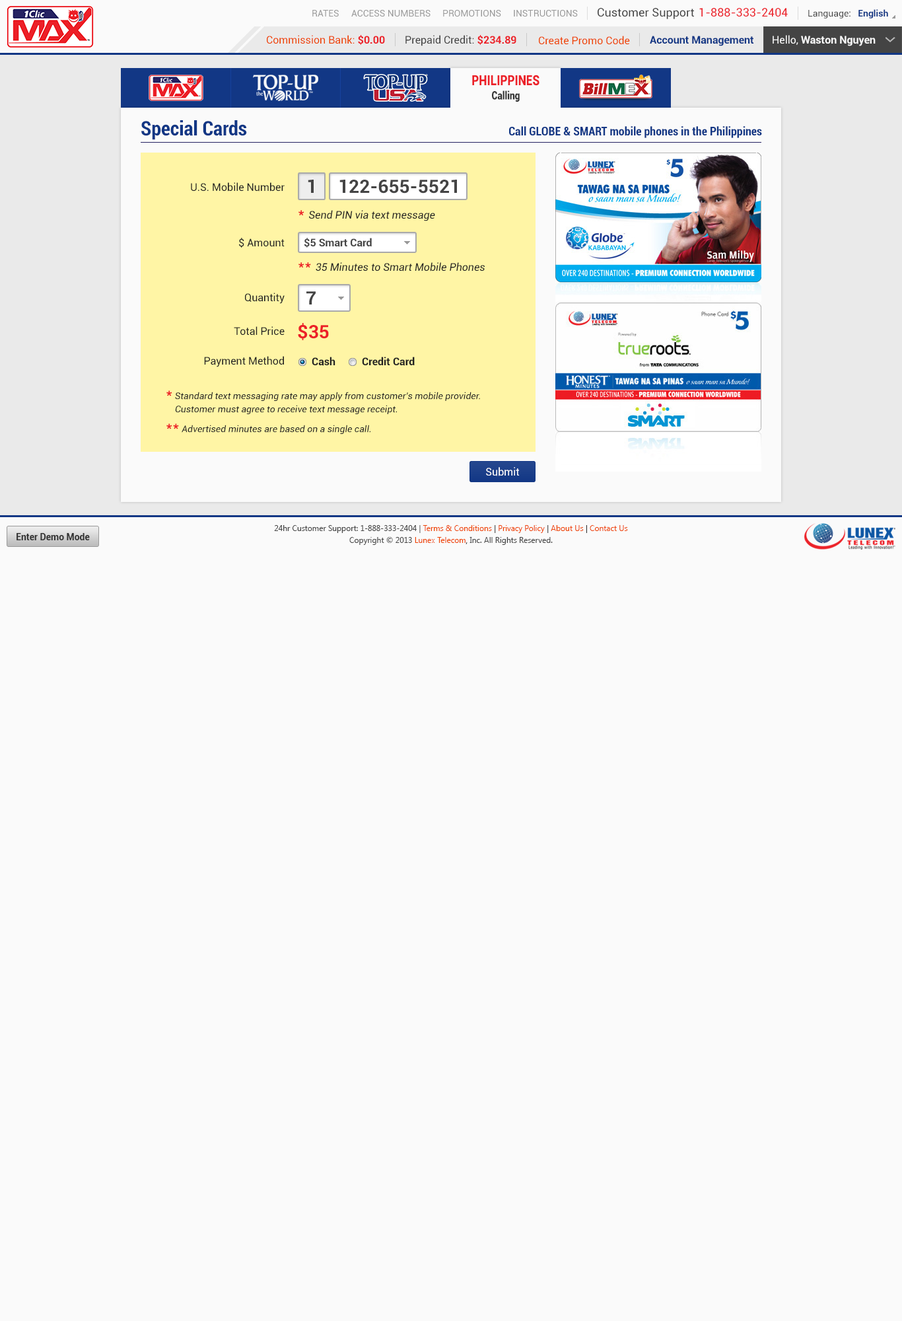
<style>
.page{position:relative;width:902px;height:1321px;background:#fafafa}
.page>*{position:absolute;margin:0}
.t1{font:9.2px "Roboto-Regular";color:#999999}
.t2{font:11.6px "Roboto-Regular";color:#444444}
.t3{font:11.6px "Roboto-Regular";color:#ec2029}
.t4{font:9.2px "Roboto-Regular";color:#444444}
.t5{font:9.2px "Roboto-Bold";color:#123785}
.t6{font:10.6px "Roboto-Regular";color:#ee4400}
.t7{font:10.6px "Roboto-Bold";color:#ec2028}
.t8{font:10.6px "Roboto-Regular";color:#444444}
.t9{font:10.6px "Roboto-Bold";color:#123785}
.t10{font:10.6px "Roboto-Bold";color:#fafafa}
.t11{font:10.6px "Roboto-Regular";color:#fafafa}
.t12{font:14.1px "Roboto-Black";color:#ec2028;scale:0.81 1}
.t13{font:11.3px "Roboto-Black";color:#333333;scale:0.81 1}
.t14{font:19.8px "Roboto-BoldCondensed";color:#123785}
.t15{font:11.9px "Roboto-BoldCondensed";color:#123785}
.t16{font:10.6px "Roboto-Regular";color:#222222}
.t17{font:18.5px "Roboto-Bold";color:#444444}
.t18{font:10.6px "Roboto-Italic";color:#222222}
.t19{font:15.9px "Roboto-Regular";color:#ec1e26}
.t20{font:10.6px "Roboto-Bold";color:#444444}
.t21{font:18.5px "Roboto-Bold";color:#ec2028}
.t22{font:10.6px "Roboto-Bold";color:#222222}
.t23{font:9.2px/13.2px "Roboto-Italic";color:#222222}
.t24{font:15.9px/11.9px "Roboto-Regular";color:#ec1e26}
.t25{font:9.2px "Roboto-Italic";color:#222222}
.t26{font:10.6px "Roboto-Regular";color:#ffffff}
.t27{font:9.2px "Roboto-Bold";color:#333333}
.t28{font:7.9px/11.9px "SegoeUI";color:#444444}
.t29{font:7.9px/11.9px "SegoeUI";color:#ee4400}
.t30{font:7.9px/11.9px "SegoeUI";color:#333333}
</style>
<div class="page">
<p class="t1" style="left:312px;top:10px;width:27px;height:7px">RATES</p>
<p class="t1" style="left:351px;top:10px;width:80px;height:7px">ACCESS NUMBERS</p>
<p class="t1" style="left:443px;top:10px;width:58px;height:7px">PROMOTIONS</p>
<p class="t1" style="left:514px;top:10px;width:64px;height:7px">INSTRUCTIONS</p>
<p class="t2" style="left:598px;top:8px;width:96px;height:11px">Customer Support</p>
<p class="t3" style="left:700px;top:8px;width:88px;height:9px">1-888-333-2404</p>
<p class="t4" style="left:809px;top:9px;width:80px;height:9px">Language:   <span class="t5">English</span></p>
<p class="t6" style="left:267px;top:35px;width:118px;height:10px">Commission Bank: <span class="t7">$0.00</span></p>
<p class="t8" style="left:406px;top:35px;width:111px;height:11px">Prepaid Credit: <span class="t7">$234.89</span></p>
<p class="t6" style="left:539px;top:36px;width:91px;height:9px">Create Promo Code</p>
<p class="t9" style="left:650px;top:36px;width:104px;height:10px">Account Management</p>
<p class="t10" style="left:773px;top:35px;width:103px;height:11px"><span class="t11">Hello, </span>Waston Nguyen</p>
<p class="t12" style="left:472px;top:75px;width:68px;height:11px">PHILIPPINES</p>
<p class="t13" style="left:492px;top:91px;width:28px;height:11px">Calling</p>
<p class="t14" style="left:141px;top:120px;width:106px;height:20px">Special Cards</p>
<p class="t15" style="left:509px;top:126px;width:253px;height:12px">Call GLOBE &amp; SMART mobile phones in the Philippines</p>
<p class="t16" style="left:191px;top:182px;width:94px;height:10px">U.S. Mobile Number</p>
<p class="t17" style="left:308px;top:180px;width:6px;height:13px">1</p>
<p class="t17" style="left:340px;top:180px;width:117px;height:14px">122-655-5521</p>
<p class="t18" style="left:299px;top:210px;width:136px;height:11px"><span class="t19">* </span>Send PIN via text message</p>
<p class="t16" style="left:239px;top:238px;width:46px;height:10px">$ Amount</p>
<p class="t20" style="left:304px;top:238px;width:68px;height:10px">$5 Smart Card</p>
<p class="t18" style="left:299px;top:262px;width:186px;height:10px"><span class="t19">** </span>35 Minutes to Smart Mobile Phones</p>
<p class="t16" style="left:245px;top:293px;width:40px;height:11px">Quantity</p>
<p class="t17" style="left:307px;top:291px;width:9px;height:14px">7</p>
<p class="t16" style="left:234px;top:326px;width:51px;height:10px">Total Price</p>
<p class="t21" style="left:298px;top:323px;width:31px;height:17px">$35</p>
<p class="t16" style="left:204px;top:356px;width:80px;height:11px">Payment Method</p>
<p class="t22" style="left:312px;top:357px;width:24px;height:9px">Cash</p>
<p class="t22" style="left:362px;top:357px;width:53px;height:9px">Credit Card</p>
<p class="t23" style="left:166px;top:390px;width:314px;height:24px"><span class="t24">* </span>Standard text messaging rate may apply from customer's mobile provider.<br>    Customer must agree to receive text message receipt.</p>
<p class="t25" style="left:166px;top:423px;width:205px;height:11px"><span class="t19">** </span>Advertised minutes are based on a single call.</p>
<p class="t26" style="left:486px;top:467px;width:34px;height:9px">Submit</p>
<p class="t27" style="left:17px;top:533px;width:73px;height:7px">Enter Demo Mode</p>
<p class="t28" style="left:274px;top:525px;width:354px;height:20px;text-align:center">24hr Customer Support: 1-888-333-2404 | <span class="t29">Terms &amp; Conditions</span><span class="t30"> | </span><span class="t29">Privacy Policy</span><span class="t30"> | </span><span class="t29">About Us</span><span class="t30"> | </span><span class="t29">Contact Us<br></span>Copyright © 2013 <span class="t29">Lunex Telecom</span><span class="t30">,</span> Inc. All Rights Reserved.</p>
</div>
